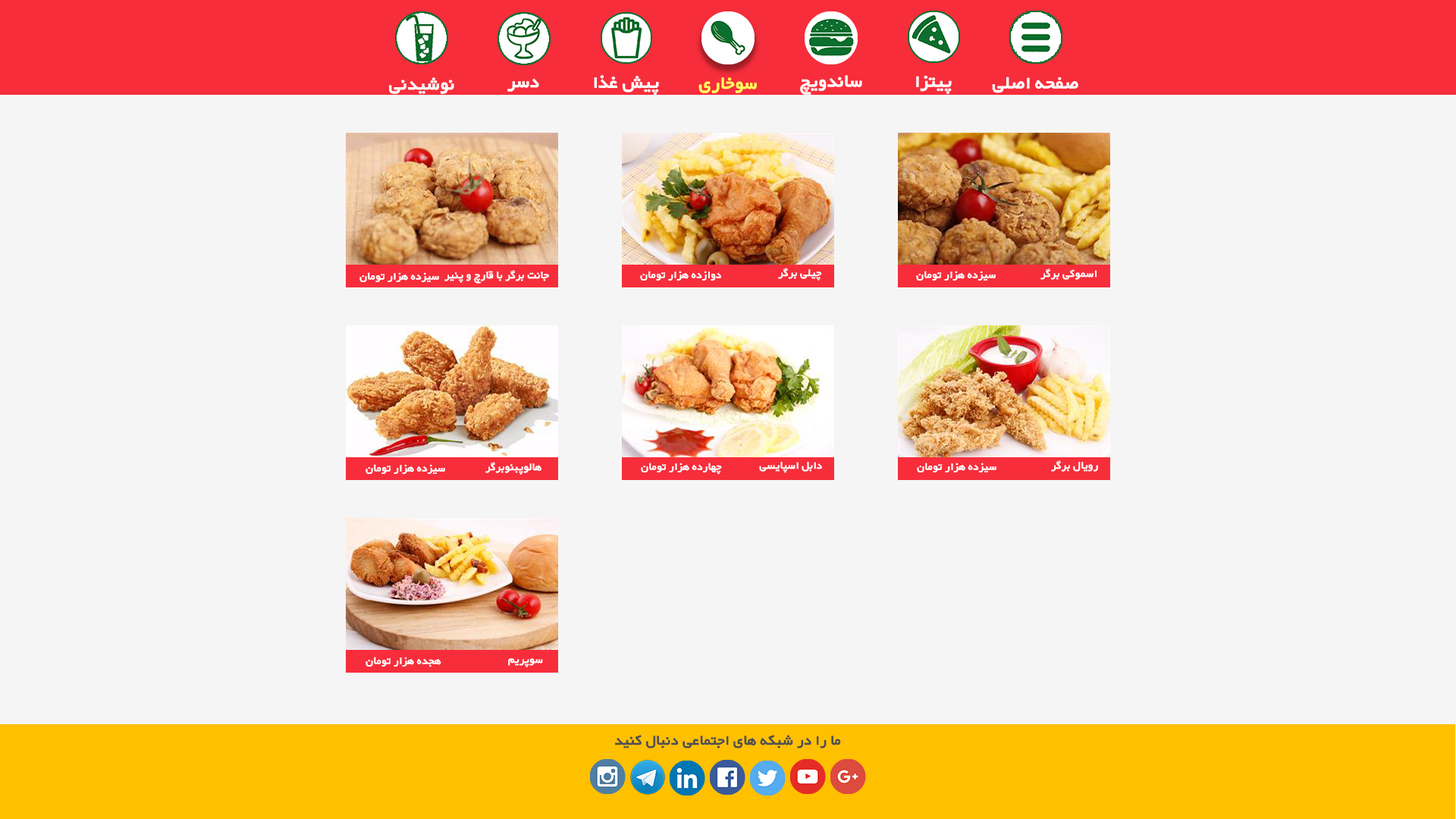
<style>
.page{position:relative;width:1456px;height:819px;background:#f5f5f5}
.page>*{position:absolute;margin:0}
.t1{font:22.7px "WyekanBold";color:#ffffff}
.t2{font:22.7px "WyekanBold";color:#fdff5d}
.t3{font:13.6px "WyekanBold";color:#ffffff}
.t4{font:18.4px "WyekanBold";color:#505050}
</style>
<div class="page">
<p class="t1" style="left:389px;top:77px;width:65px;height:17px">نوشیدنی</p>
<p class="t1" style="left:594px;top:75px;width:65px;height:20px">پیش غذا</p>
<p class="t2" style="left:698px;top:77px;width:59px;height:16px">سوخاری</p>
<p class="t1" style="left:800px;top:75px;width:62px;height:20px">ساندویچ</p>
<p class="t1" style="left:916px;top:75px;width:36px;height:19px">پیتزا</p>
<p class="t1" style="left:992px;top:77px;width:86px;height:16px">صفحه اصلی</p>
<p class="t1" style="left:507px;top:78px;width:32px;height:14px">دسر</p>
<p class="t3" style="left:444px;top:270px;width:105px;height:14px">جانت برگر با قارچ و پنیر</p>
<p class="t3" style="left:778px;top:268px;width:44px;height:13px">چیلی برگر</p>
<p class="t3" style="left:1040px;top:268px;width:57px;height:12px">اسموکی برگر</p>
<p class="t3" style="left:359px;top:272px;width:80px;height:10px">سیزده هزار تومان</p>
<p class="t3" style="left:640px;top:271px;width:81px;height:10px">دوازده هزار تومان</p>
<p class="t3" style="left:916px;top:271px;width:80px;height:10px">سیزده هزار تومان</p>
<p class="t3" style="left:485px;top:462px;width:56px;height:13px">هالوپبنوبرگر</p>
<p class="t3" style="left:759px;top:462px;width:63px;height:11px">دابل اسپایسی</p>
<p class="t3" style="left:1051px;top:460px;width:47px;height:12px">رویال برگر</p>
<p class="t3" style="left:366px;top:464px;width:79px;height:10px">سیزده هزار تومان</p>
<p class="t3" style="left:641px;top:463px;width:81px;height:12px">چهارده هزار تومان</p>
<p class="t3" style="left:917px;top:463px;width:79px;height:9px">سیزده هزار تومان</p>
<p class="t3" style="left:366px;top:657px;width:75px;height:10px">هجده هزار تومان</p>
<p class="t3" style="left:508px;top:658px;width:35px;height:9px">سوپریم</p>
<p class="t4" style="left:614px;top:735px;width:227px;height:13px">ما را در شبکه های اجتماعی دنبال کنید</p>
</div>
